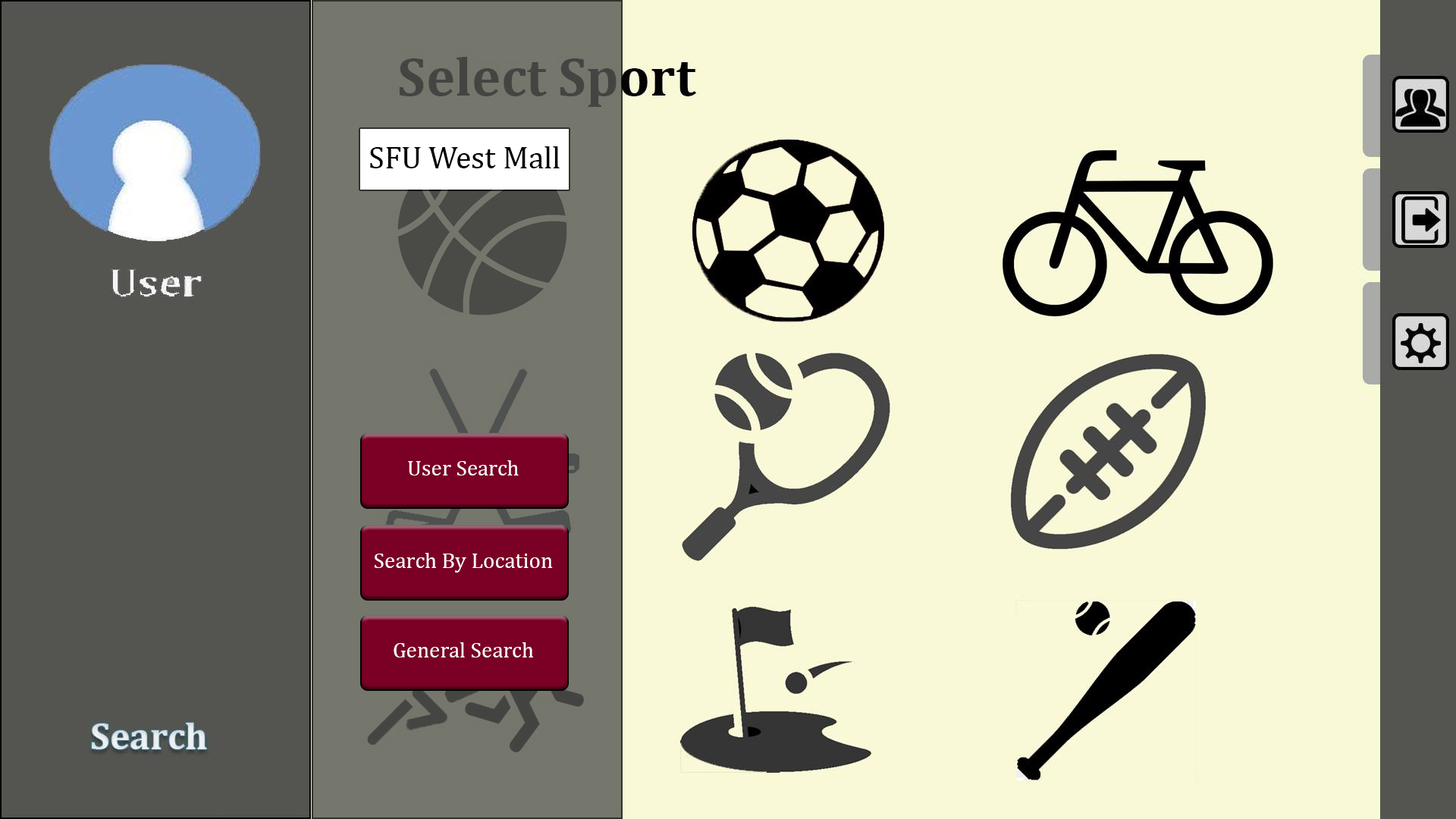
<style>
.page{position:relative;width:1456px;height:819px;background:#f9f9d7}
.page>*{position:absolute;margin:0}
.t1{font:31.6px "Cambria";color:#000000}
.t2{font:22.1px "Cambria";color:#ffffff}
</style>
<div class="page">
<p class="t1" style="left:370px;top:146px;width:190px;height:22px">SFU West Mall</p>
<p class="t2" style="left:408px;top:460px;width:111px;height:15px">User Search</p>
<p class="t2" style="left:375px;top:553px;width:178px;height:20px">Search By Location</p>
<p class="t2" style="left:394px;top:642px;width:139px;height:15px">General Search</p>
</div>
